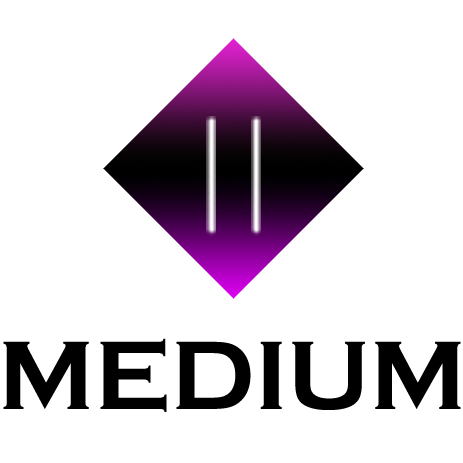
<style>
.page{position:relative;width:463px;height:463px;background:#ffffff}
.page>*{position:absolute;margin:0}
.t1{font:100.3px "CopperplateGothic-Bold";color:#000000}
</style>
<div class="page">
<p class="t1" style="left:3px;top:338px;width:458px;height:74px">MEDIUM</p>
</div>
